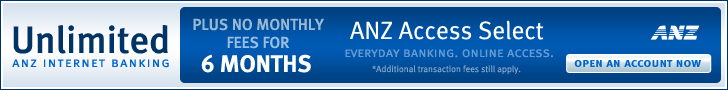
<style>
.page{position:relative;width:728px;height:90px}
.page>*{position:absolute;margin:0}
.t1{font:38px "MetaMediumLF-Roman";color:#003366}
.t2{font:16px/18px "MetaMediumLF-Roman";color:#99b9d7}
.t3{font:25px "MetaNormalLF-Roman";color:#ffffff}
.t4{font:24px "MetaBoldLF-Roman";color:#ffffff}
.t5{font:14px "MetaNormalLF-Caps";color:#669cd1}
.t6{font:14px "MetaNormalLF-Caps";letter-spacing:0.086em;color:#0066cc}
.t7{font:9px "MetaNormalLF-Roman";color:#80a5c9}
.t8{font:13px "MetaBold-Caps";letter-spacing:0.01em;color:#0066cc}
</style>
<div class="page">
<p class="t1" style="left:13px;top:25px;width:155px;height:29px">Unlimited</p>
<p class="t2" style="left:193px;top:18px;width:131px;height:31px;text-align:center">PLUS NO MONTHLY <br>FEES FOR</p>
<p class="t3" style="left:350px;top:20px;width:194px;height:20px">ANZ Access Select</p>
<p class="t4" style="left:201px;top:54px;width:110px;height:19px">6 MONTHS</p>
<p class="t5" style="left:345px;top:49px;width:208px;height:9px">everyday banking. online access.</p>
<p class="t6" style="left:12px;top:59px;width:157px;height:9px">anz internet banking</p>
<p class="t7" style="left:372px;top:65px;width:149px;height:9px">*Additional transaction fees still apply.</p>
<p class="t8" style="left:574px;top:60px;width:127px;height:7px">open an account now</p>
</div>
